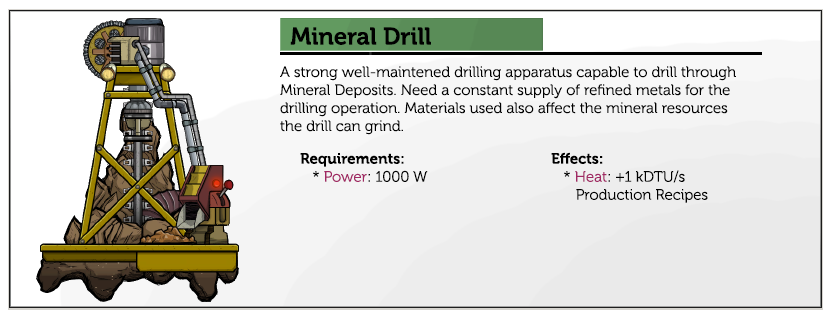
<style>
.page{position:relative;width:830px;height:320px;background:#ffffff}
.page>*{position:absolute;margin:0}
.t1{font:24px "Museo-700";color:#000000}
.t2{font:15px "Museo-300";color:#000000}
.t3{font:15px "Museo-700";color:#000000}
.t4{font:15px "Museo-300";color:#a12864}
</style>
<div class="page">
<p class="t1" style="left:290px;top:27px;width:141px;height:18px">Mineral Drill</p>
<p class="t2" style="left:280px;top:66px;width:456px;height:69px">A strong well-maintened drilling apparatus capable to drill through Mineral Deposits. Need a constant supply of refined metals for the drilling operation. Materials used also affect the mineral resources the drill can grind.</p>
<p class="t3" style="left:300px;top:153px;width:128px;height:29px">Requirements:<br><span class="t2">   * </span><span class="t4">Power</span><span class="t2">: 1000 W</span></p>
<p class="t2" style="left:551px;top:152px;width:157px;height:51px"><span class="t3">Effects:</span><br>   * <span class="t4">Heat</span>: +1 kDTU/s<br>      Production Recipes</p>
</div>
